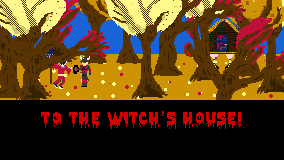
<style>
.page{position:relative;width:284px;height:160px;background:#000000}
.page>*{position:absolute;margin:0}
.t1{font:14px "PiecesNFI";letter-spacing:0.06em;color:#d20000}
</style>
<div class="page">
<p class="t1" style="left:41px;top:111px;width:200px;height:18px">To the Witch’s House!</p>
</div>
